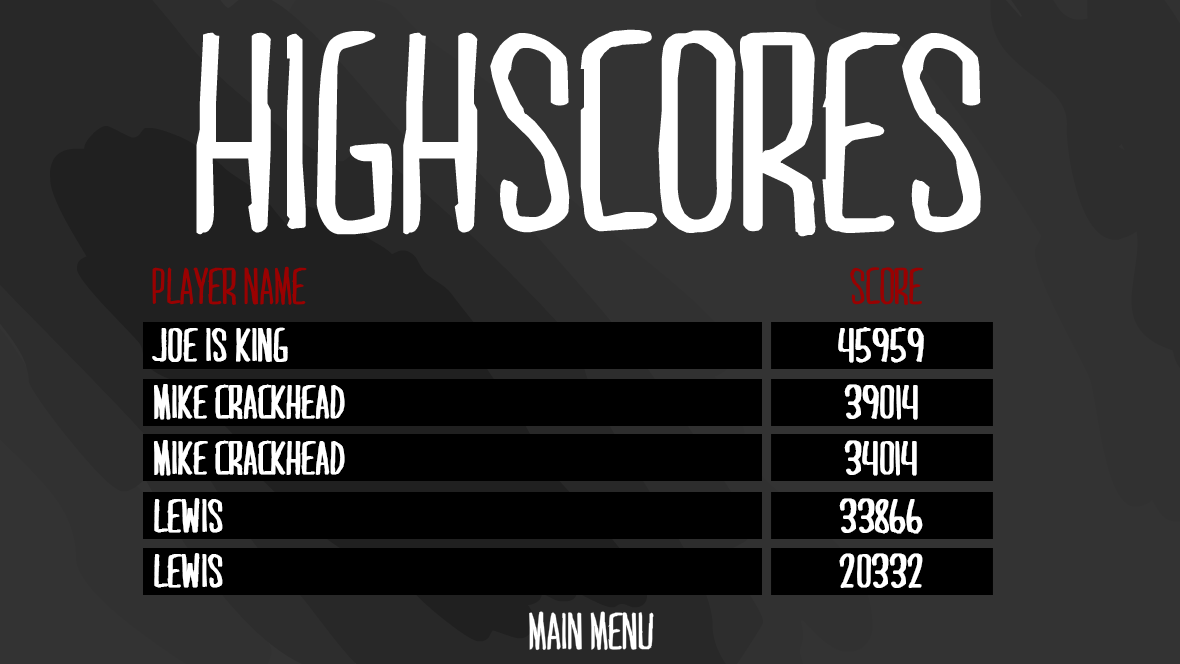
<style>
.page{position:relative;width:1180px;height:664px;background:#333333}
.page>*{position:absolute;margin:0}
.t1{font:44px "MARI&DAVID";color:#ffffff;font-weight:bold}
</style>
<div class="page">
<p class="t1" style="left:152px;top:327px;width:136px;height:35px">joe is king</p>
<p class="t1" style="left:838px;top:327px;width:86px;height:36px">45959</p>
<p class="t1" style="left:154px;top:384px;width:191px;height:36px">Mike crackhead</p>
<p class="t1" style="left:844px;top:384px;width:74px;height:36px">39014</p>
<p class="t1" style="left:154px;top:440px;width:191px;height:36px">Mike crackhead</p>
<p class="t1" style="left:844px;top:440px;width:73px;height:36px">34014</p>
<p class="t1" style="left:154px;top:498px;width:69px;height:35px">LEWIS</p>
<p class="t1" style="left:839px;top:498px;width:84px;height:36px">33866</p>
<p class="t1" style="left:154px;top:553px;width:69px;height:35px">LEWIS</p>
<p class="t1" style="left:839px;top:553px;width:84px;height:35px">20332</p>
</div>
